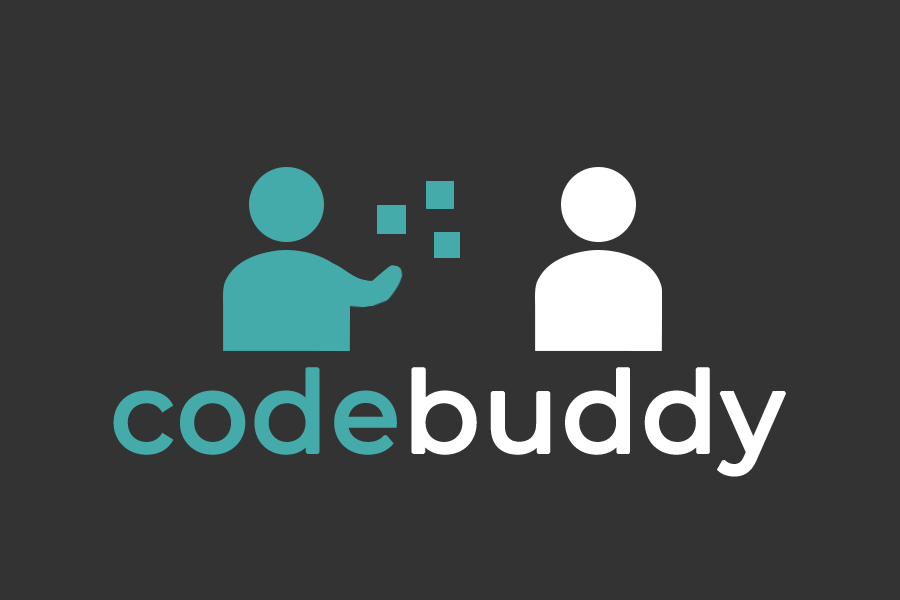
<style>
.page{position:relative;width:900px;height:600px;background:#333333}
.page>*{position:absolute;margin:0}
.t1{font:112.5px "Montserrat-Medium";color:#ffffff;font-weight:bold}
.t2{font:112.5px "Montserrat-Medium";color:#44abaa;font-weight:bold}
</style>
<div class="page">
<p class="t1" style="left:113px;top:367px;width:673px;height:110px"><span class="t2">code</span>buddy</p>
</div>
